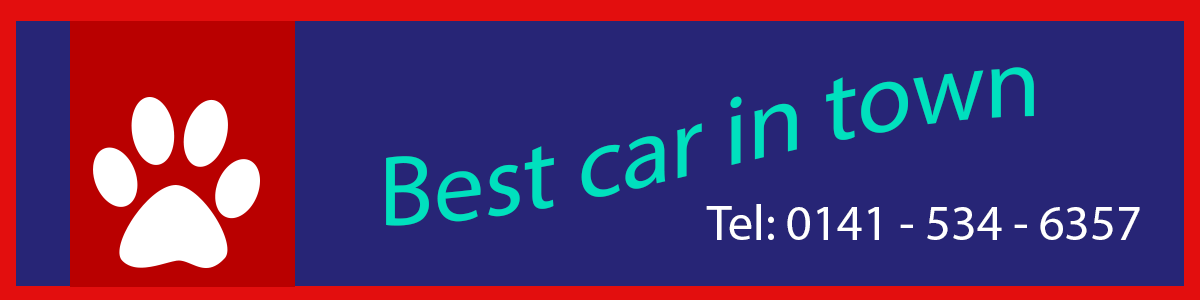
<style>
.page{position:relative;width:1200px;height:300px;background:#272576}
.page>*{position:absolute;margin:0}
.t1{font:100px "MyriadPro-Regular";color:#00e0be}
.t2{font:50px "MyriadPro-Regular";color:#ffffff}
</style>
<div class="page">
<p class="t1" style="left:386px;top:67px;width:648px;height:159px">Best car in town</p>
<p class="t2" style="left:706px;top:204px;width:434px;height:36px">Tel: 0141 - 534 - 6357</p>
</div>
